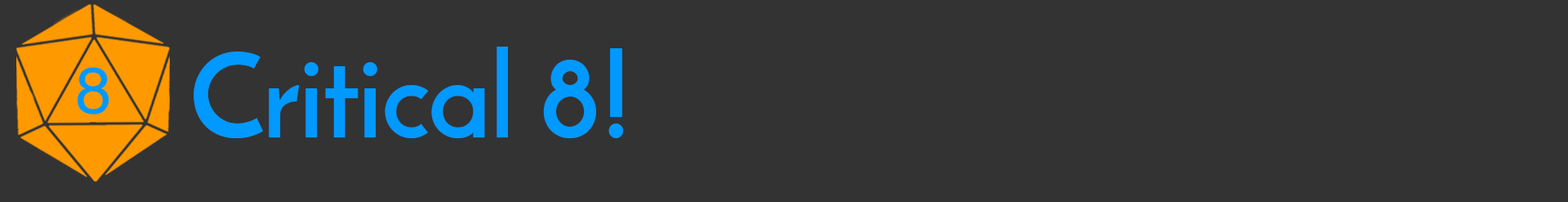
<style>
.page{position:relative;width:1568px;height:202px;background:#333333}
.page>*{position:absolute;margin:0}
.t1{font:116px "JosefinSans-Bold";letter-spacing:-0.01em;color:#0099ff}
</style>
<div class="page">
<p class="t1" style="left:194px;top:47px;width:429px;height:91px">Critical 8!</p>
</div>
